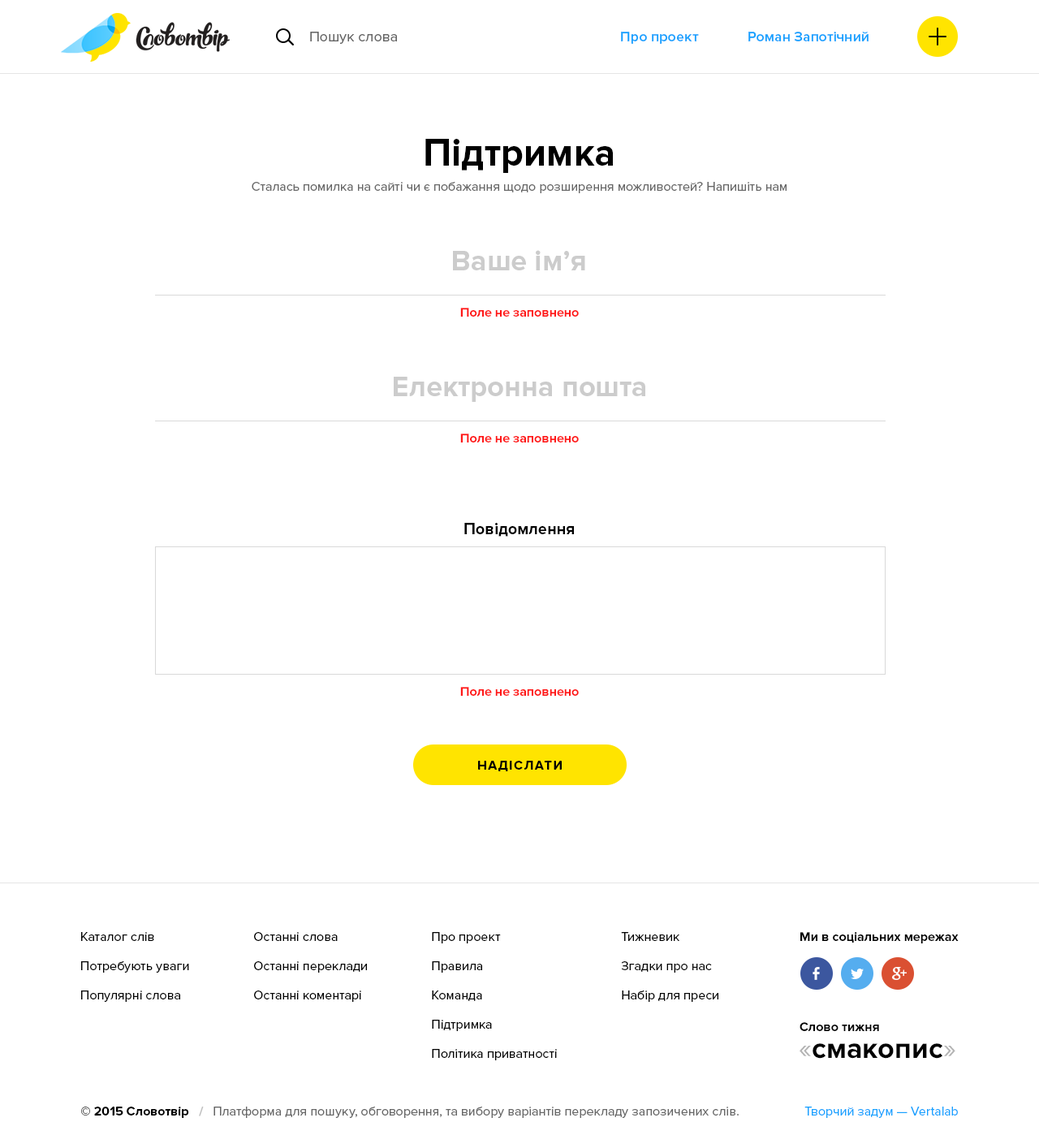
<style>
.page{position:relative;width:1039px;height:1148px;background:#ffffff}
.page>*{position:absolute;margin:0}
.t1{font:14.6px "ProximaNova-Regular";color:#666666}
.t2{font:14.6px "ProximaNova-Semibold";color:#17a2ff}
.t3{font:39px "ProximaNova-Bold";color:#000000}
.t4{font:13px "ProximaNova-Regular";color:#666666}
.t5{font:29.2px "ProximaNova-Bold";color:#cccccc}
.t6{font:13px "ProximaNova-Bold";color:#ff1717}
.t7{font:16.2px "ProximaNova-Bold";color:#000000}
.t8{font:13px "ProximaNova-Bold";letter-spacing:0.1em;color:#000000;text-transform:uppercase}
.t9{font:13px/29.2px "ProximaNova-Regular";color:#000000}
.t10{font:13px/29.2px "ProximaNova-Regular";color:#010101}
.t11{font:13px "ProximaNova-Bold";color:#010101}
.t12{font:29.2px "ProximaNova-Bold";color:#000000}
.t13{font:29.2px "ProximaNova-Regular";color:#b3b3b3}
.t14{font:13px "ProximaNova-Bold";color:#000000}
.t15{font:13px "ProximaNova-Bold";color:#bfbfbf}
.t16{font:13px "ProximaNova-Regular";color:#17a2ff}
</style>
<div class="page">
<p class="t1" style="left:310px;top:32px;width:87px;height:12px">Пошук слова</p>
<p class="t2" style="left:621px;top:32px;width:78px;height:12px">Про проект</p>
<p class="t2" style="left:748px;top:32px;width:121px;height:9px">Роман Запотічний</p>
<p class="t3" style="left:425px;top:139px;width:188px;height:34px">Підтримка</p>
<p class="t4" style="left:252px;top:182px;width:535px;height:11px">Сталась помилка на сайті чи є побажання щодо розширення можливостей? Напишіть нам</p>
<p class="t5" style="left:453px;top:250px;width:132px;height:20px">Ваше ім’я</p>
<p class="t6" style="left:460px;top:308px;width:119px;height:9px">Поле не заповнено</p>
<p class="t5" style="left:394px;top:377px;width:251px;height:25px">Електронна пошта</p>
<p class="t6" style="left:460px;top:433px;width:119px;height:9px">Поле не заповнено</p>
<p class="t7" style="left:464px;top:523px;width:110px;height:14px">Повідомлення</p>
<p class="t6" style="left:460px;top:687px;width:119px;height:9px">Поле не заповнено</p>
<p class="t8" style="left:478px;top:761px;width:84px;height:10px">Надіслати</p>
<p class="t9" style="left:81px;top:932px;width:108px;height:70px">Каталог слів<br>Потребують уваги<br>Популярні слова</p>
<p class="t9" style="left:254px;top:932px;width:113px;height:70px">Останні слова<br>Останні переклади<br>Останні коментарі</p>
<p class="t9" style="left:432px;top:932px;width:125px;height:128px">Про проект<br>Правила<br>Команда<br>Підтримка<br>Політика приватності</p>
<p class="t10" style="left:621px;top:932px;width:97px;height:70px">Тижневик<br>Згадки про нас<br>Набір для преси</p>
<p class="t11" style="left:800px;top:932px;width:159px;height:11px">Ми в соціальних мережах</p>
<p class="t11" style="left:800px;top:1022px;width:79px;height:9px">Слово тижня</p>
<p class="t12" style="left:800px;top:1043px;width:155px;height:15px"><span class="t13">«</span>смакопис<span class="t13">»</span></p>
<p class="t4" style="left:81px;top:1106px;width:658px;height:12px"><span class="t14">© 2015 Словотвір   </span><span class="t15">/   </span>Платформа для пошуку, обговорення, та вибору варіантів перекладу запозичених слів.</p>
<p class="t16" style="left:804px;top:1106px;width:154px;height:12px">Творчий задум — Vertalab</p>
</div>
